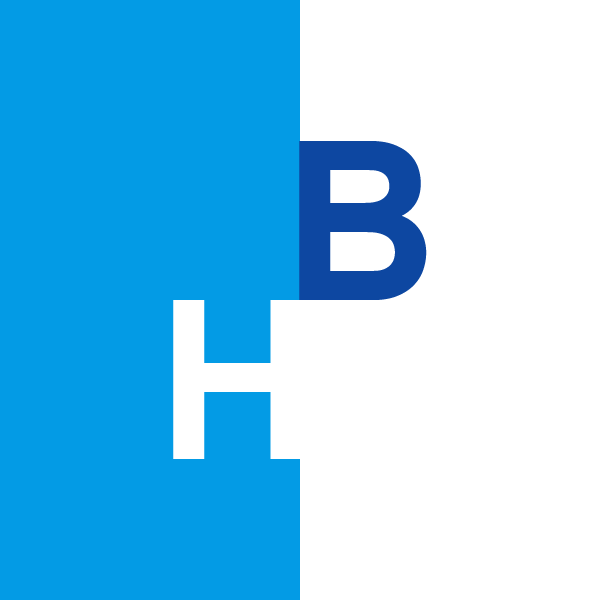
<style>
.page{position:relative;width:600px;height:600px;background:#ffffff}
.page>*{position:absolute;margin:0}
.t1{font:227px "Overpass-Bold";color:#0d47a1}
.t2{font:227px "Overpass-Bold";color:#ffffff}
</style>
<div class="page">
<p class="t1" style="left:299px;top:141px;width:128px;height:159px">B</p>
<p class="t2" style="left:173px;top:300px;width:129px;height:159px">H</p>
</div>
